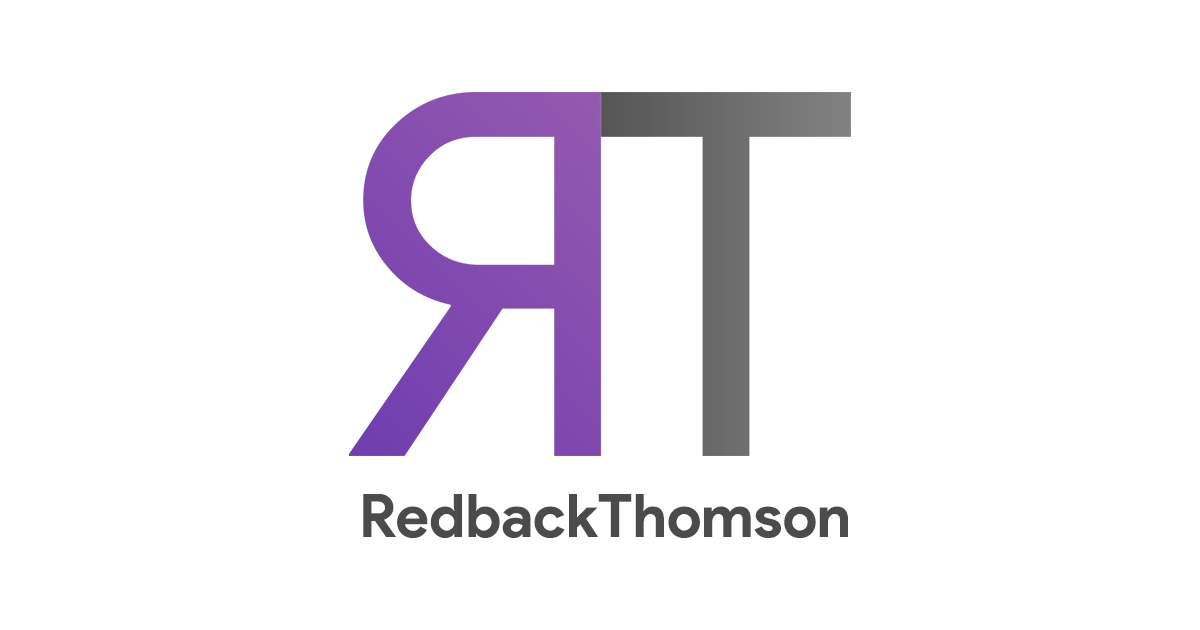
<style>
.page{position:relative;width:1200px;height:630px;background:#ffffff}
.page>*{position:absolute;margin:0}
.t1{font:60px "ProductSans-Bold";color:#4b4b4b}
</style>
<div class="page">
<p class="t1" style="left:363px;top:494px;width:485px;height:44px">RedbackThomson</p>
</div>
